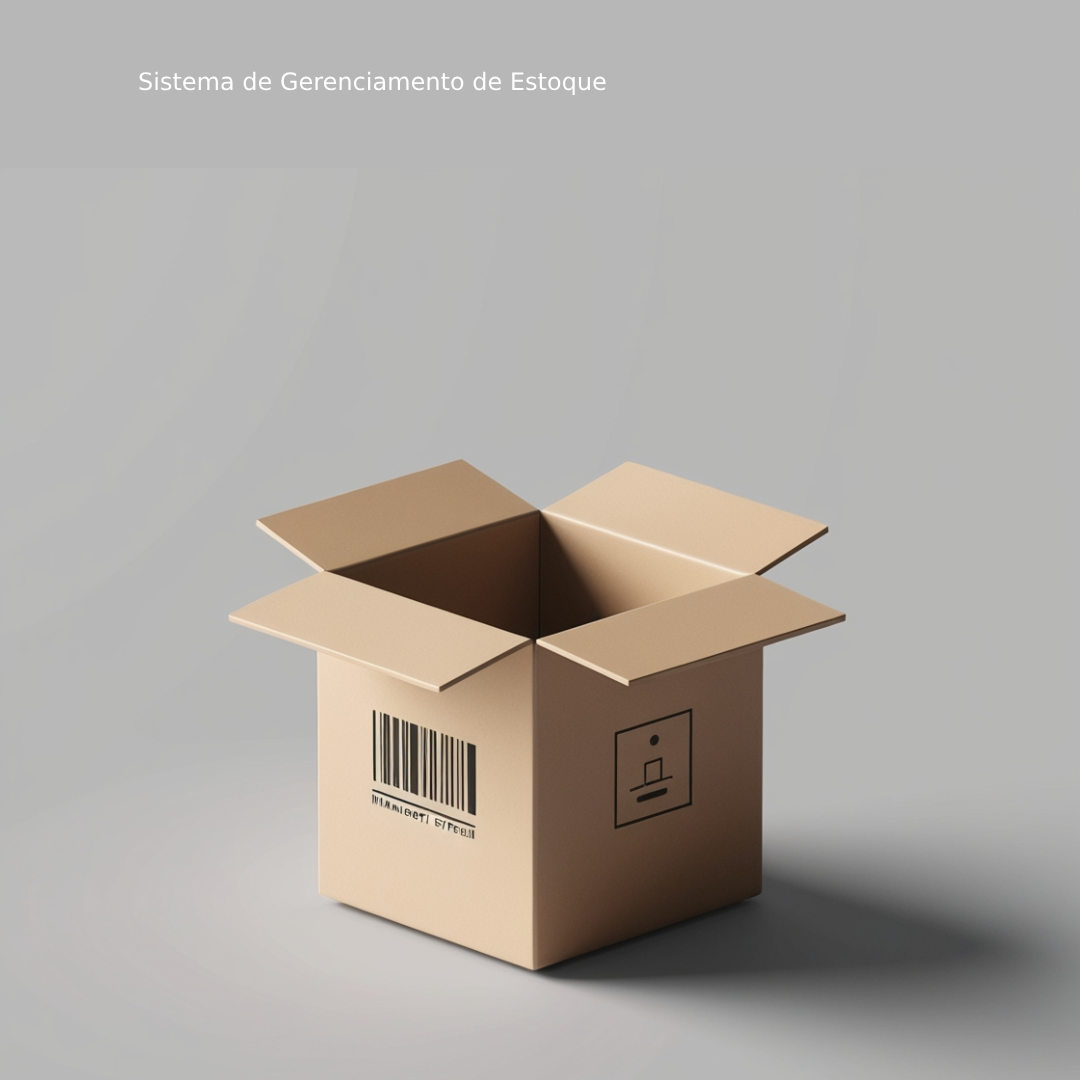
<style>
.page{position:relative;width:1080px;height:1080px;background:#b7b7b7}
.page>*{position:absolute;margin:0}
.t1{font:24px "DejaVuSans";color:#ffffff}
</style>
<div class="page">
<p class="t1" style="left:139px;top:71px;width:467px;height:24px">Sistema de Gerenciamento de Estoque</p>
</div>
